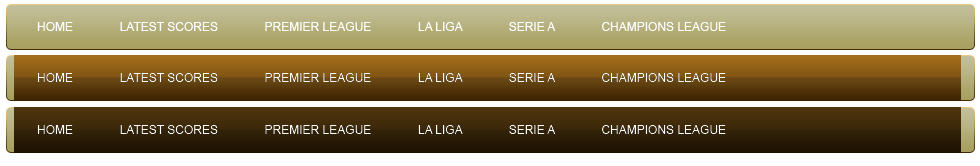
<style>
.page{position:relative;width:980px;height:166px}
.page>*{position:absolute;margin:0}
.t1{font:12px "ArialMT";color:#ffffff;text-transform:uppercase}
</style>
<div class="page">
<p class="t1" style="left:37px;top:22px;width:689px;height:9px">Home              Latest scores              PRemier League              La Liga              Serie A              Champions league</p>
<p class="t1" style="left:37px;top:73px;width:689px;height:9px">Home              Latest scores              PRemier League              La Liga              Serie A              Champions league</p>
<p class="t1" style="left:37px;top:125px;width:689px;height:9px">Home              Latest scores              PRemier League              La Liga              Serie A              Champions league</p>
</div>
